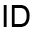
<style>
.page{position:relative;width:32px;height:32px;background:#ffffff}
.page>*{position:absolute;margin:0}
.t1{font:30px "ArialMT";color:#000000}
</style>
<div class="page">
<p class="t1" style="left:3px;top:5px;width:27px;height:22px">ID</p>
</div>
